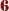
<style>
.page{position:relative;width:9px;height:11px;background:#9a0101}
.page>*{position:absolute;margin:0}
.t1{font:16px "Stencil";color:#9a0101}
</style>
<div class="page">
<p class="t1" style="left:0px;top:0px;width:9px;height:11px">6</p>
</div>
